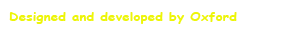
<style>
.page{position:relative;width:290px;height:33px;background:#ffffff}
.page>*{position:absolute;margin:0}
.t1{font:12px "ComicSansMS-Bold";color:#edf509;scale:1.12 1}
</style>
<div class="page">
<p class="t1" style="left:9px;top:12px;width:228px;height:12px">Designed and developed by Oxford</p>
</div>
